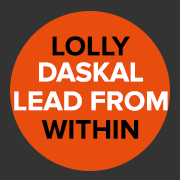
<style>
.page{position:relative;width:180px;height:180px;background:#e84d0e}
.page>*{position:absolute;margin:0}
.t1{font:28px "ProximaNova-Bold";color:#000000;text-transform:uppercase}
.t2{font:28px "ProximaNova-Bold";color:#ffffff;text-transform:uppercase}
</style>
<div class="page">
<p class="t1" style="left:52px;top:36px;width:78px;height:20px">Lolly</p>
<p class="t2" style="left:39px;top:62px;width:104px;height:20px">Daskal</p>
<p class="t2" style="left:14px;top:91px;width:154px;height:20px">Lead From</p>
<p class="t1" style="left:41px;top:120px;width:98px;height:19px">Within</p>
</div>
